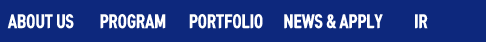
<style>
.page{position:relative;width:486px;height:42px;background:#0d287d}
.page>*{position:absolute;margin:0}
.t1{font:16px "TmonMonsoriBlack";color:#ffffff;scale:0.8 1}
</style>
<div class="page">
<p class="t1" style="left:7px;top:14px;width:67px;height:15px">ABOUT US</p>
<p class="t1" style="left:7px;top:14px;width:67px;height:15px">ABOUT US</p>
<p class="t1" style="left:100px;top:14px;width:66px;height:15px">PROGRAM</p>
<p class="t1" style="left:100px;top:14px;width:66px;height:15px">PROGRAM</p>
<p class="t1" style="left:189px;top:14px;width:74px;height:15px">PORTFOLIO</p>
<p class="t1" style="left:189px;top:14px;width:74px;height:15px">PORTFOLIO</p>
<p class="t1" style="left:284px;top:14px;width:99px;height:15px">NEWS &amp; APPLY</p>
<p class="t1" style="left:284px;top:14px;width:99px;height:15px">NEWS &amp; APPLY</p>
<p class="t1" style="left:415px;top:14px;width:13px;height:15px">IR</p>
<p class="t1" style="left:415px;top:14px;width:13px;height:15px">IR</p>
</div>
